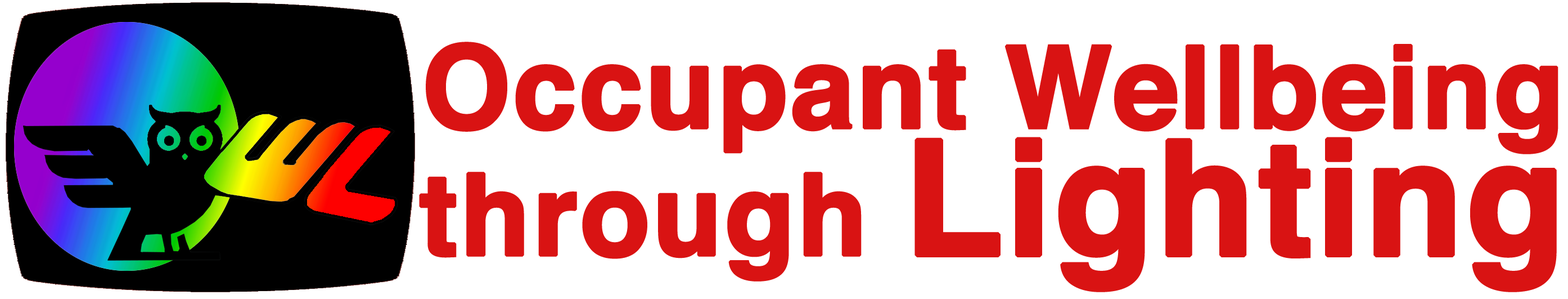
<style>
.page{position:relative;width:1568px;height:299px;background:#ffffff}
.page>*{position:absolute;margin:0}
.t1{font:113.6px "Helvetica-Bold";color:#d91313;font-weight:bold}
.t2{font:113.6px/127.1px "Helvetica-Bold";color:#d91313;font-weight:bold}
.t3{font:159.7px/127.1px "Helvetica-Bold";color:#d91313;font-weight:bold}
</style>
<div class="page">
<p class="t1" style="left:419px;top:42px;width:1139px;height:250px;text-align:center">Occupant Wellbeing<br><span class="t2">through </span><span class="t3">Lighting</span></p>
</div>
